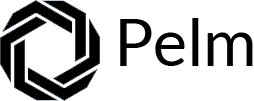
<style>
.page{position:relative;width:254px;height:101px;background:#ffffff}
.page>*{position:absolute;margin:0}
.t1{font:65px "Lato-Regular";color:#000000}
</style>
<div class="page">
<p class="t1" style="left:120px;top:18px;width:133px;height:48px">Pelm</p>
</div>
